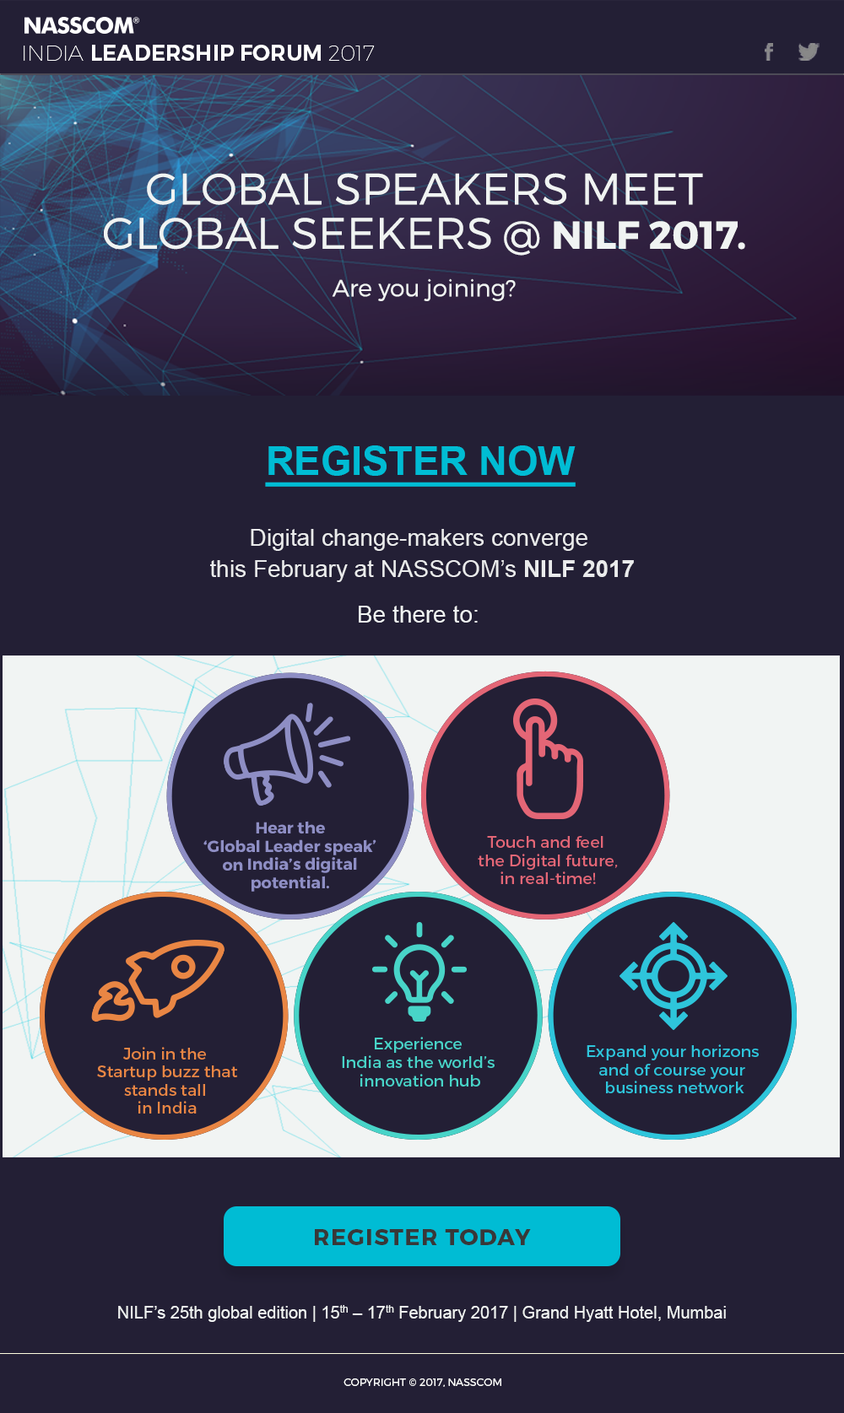
<style>
.page{position:relative;width:844px;height:1413px;background:#231f35}
.page>*{position:absolute;margin:0}
.t1{font:22px "Montserrat-SemiBold";color:#ffffff;text-transform:uppercase}
.t2{font:22px "Montserrat-Hairline";color:#ffffff;text-transform:uppercase}
.t3{font:43.9px/44.4px "Montserrat-Light";color:#f0f3f2;text-transform:uppercase}
.t4{font:38.8px/44.4px "Montserrat-Light";color:#f0f3f2;text-transform:uppercase}
.t5{font:38.8px/44.4px "Montserrat-Bold";color:#f0f3f2;text-transform:uppercase}
.t6{font:23.6px "Montserrat-Light";color:#f0f3f2}
.t7{font:39.6px "Arial-BoldMT";color:#00bcd4;text-transform:uppercase;text-decoration:underline}
.t8{font:23.6px/31.2px "ArialMT";color:#eaebec}
.t9{font:23.6px/31.2px "Arial-BoldMT";color:#eaebec}
.t10{font:23.6px "ArialMT";color:#f1f4f3}
.t11{font:16px/18.2px "Montserrat-Bold";color:#8e8ec4}
.t12{font:16px/18.2px "Montserrat-Regular";color:#e46676}
.t13{font:16px/18.2px "Montserrat-Regular";color:#48d4c8}
.t14{font:16px/18.2px "Montserrat-Regular";color:#e98644}
.t15{font:16px/18.2px "Montserrat-Regular";color:#2ec5db}
.t16{font:22.8px "Montserrat-Bold";letter-spacing:0.05em;color:#383838;text-transform:uppercase}
.t17{font:16.9px "ArialMT";color:#f0f3f2}
.t18{font:10.5px "Montserrat-Light";color:#ffffff;text-transform:uppercase}
</style>
<div class="page">
<p class="t1" style="left:24px;top:45px;width:351px;height:16px"><span class="t2">India </span>Leadership Forum <span class="t2">2017</span></p>
<p class="t3" style="left:104px;top:173px;width:641px;height:83px;text-align:center">Global speakers meet<br>global seekers <span class="t4">@ </span><span class="t5">NILF 2017.</span></p>
<p class="t6" style="left:332px;top:278px;width:184px;height:23px">Are you joining?</p>
<p class="t7" style="left:265px;top:445px;width:310px;height:42px">REGISTER NOW</p>
<p class="t8" style="left:210px;top:529px;width:424px;height:53px;text-align:center">Digital change-makers converge <br>this February at NASSCOM’s <span class="t9">NILF 2017</span></p>
<p class="t10" style="left:359px;top:606px;width:119px;height:17px">Be there to:</p>
<p class="t11" style="left:203px;top:821px;width:173px;height:71px;text-align:center">Hear the <br>‘Global Leader speak’ <br>on India’s digital <br>potential.</p>
<p class="t12" style="left:478px;top:836px;width:140px;height:48px;text-align:center">Touch and feel <br>the Digital future,<br>in real-time!</p>
<p class="t13" style="left:342px;top:1037px;width:152px;height:50px;text-align:center">Experience <br>India as the world’s <br>innovation hub</p>
<p class="t14" style="left:97px;top:1047px;width:141px;height:67px;text-align:center">Join in the <br>Startup buzz that<br>stands tall <br>in India</p>
<p class="t15" style="left:586px;top:1045px;width:173px;height:48px;text-align:center">Expand your horizons <br>and of course your <br>business network</p>
<p class="t16" style="left:315px;top:1229px;width:216px;height:16px">Register TODAY</p>
<p class="t17" style="left:118px;top:1305px;width:608px;height:17px">NILF’s 25th global edition | 15th – 17th February 2017 | Grand Hyatt Hotel, Mumbai</p>
<p class="t18" style="left:343px;top:1379px;width:158px;height:8px">Copyright © 2017, NASSCOM</p>
</div>
